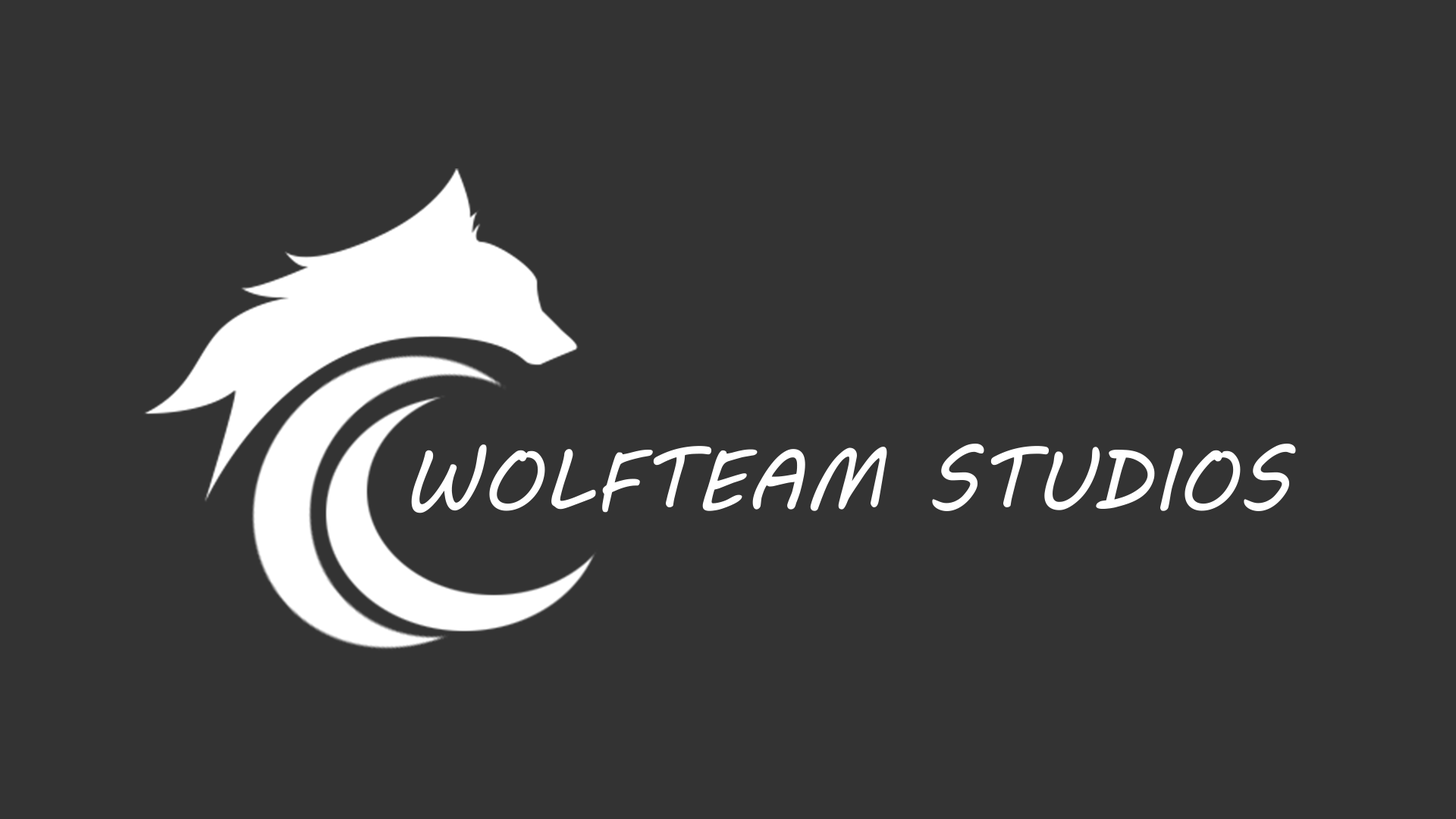
<style>
.page{position:relative;width:1456px;height:819px;background:#333333}
.page>*{position:absolute;margin:0}
.t1{font:85.2px "MVBoli";color:#ffffff}
</style>
<div class="page">
<p class="t1" style="left:411px;top:444px;width:885px;height:69px">WOLFTEAM STUDIOS</p>
</div>
